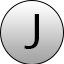
<style>
.page{position:relative;width:64px;height:64px}
.page>*{position:absolute;margin:0}
.t1{font:50px "MyriadPro-Regular";color:#000000}
</style>
<div class="page">
<p class="t1" style="left:24px;top:14px;width:15px;height:35px">J</p>
</div>
